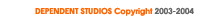
<style>
.page{position:relative;width:200px;height:20px;background:#ffffff}
.page>*{position:absolute;margin:0}
.t1{font:8px "Atlanta-Demi";color:#ff6600}
.t2{font:8px "Atlanta-Demi";color:#666666}
</style>
<div class="page">
<p class="t1" style="left:35px;top:7px;width:159px;height:9px">DEPENDENT STUDIOS Copyright <span class="t2">2003-2004</span></p>
</div>
